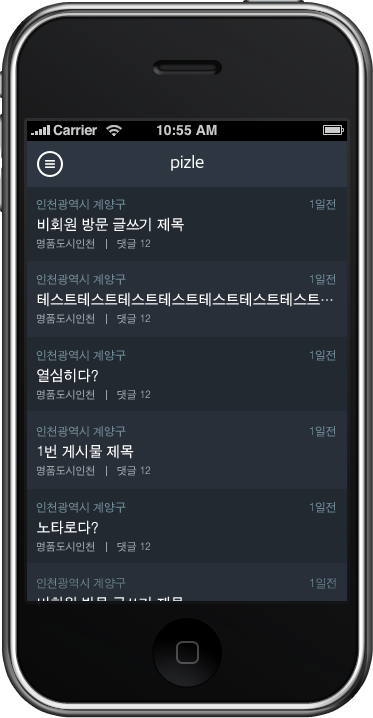
<style>
.page{position:relative;width:373px;height:718px;background:#232931}
.page>*{position:absolute;margin:0}
.t1{font:18px "AppleGothic";color:#ffffff}
.t2{font:12px "SandTg";color:#6d8a96}
.t3{font:15px "SandTg";color:#ffffff}
.t4{font:11px "SandTg";color:#9ca2a9}
</style>
<div class="page">
<p class="t1" style="left:171px;top:155px;width:33px;height:16px">pizle</p>
<p class="t2" style="left:36px;top:199px;width:90px;height:11px">인천광역시 계양구</p>
<p class="t2" style="left:310px;top:199px;width:26px;height:11px">1일전</p>
<p class="t3" style="left:38px;top:217px;width:146px;height:15px">비회원 방문 글쓰기 제목</p>
<p class="t4" style="left:37px;top:238px;width:114px;height:11px">명품도시인천       댓글 12</p>
<p class="t2" style="left:36px;top:274px;width:90px;height:11px">인천광역시 계양구</p>
<p class="t2" style="left:310px;top:274px;width:26px;height:11px">1일전</p>
<p class="t3" style="left:37px;top:292px;width:296px;height:15px">테스트테스트테스트테스트테스트테스트테스트…</p>
<p class="t4" style="left:37px;top:313px;width:114px;height:11px">명품도시인천       댓글 12</p>
<p class="t2" style="left:36px;top:350px;width:90px;height:11px">인천광역시 계양구</p>
<p class="t2" style="left:310px;top:350px;width:26px;height:11px">1일전</p>
<p class="t3" style="left:37px;top:368px;width:61px;height:15px">열심히다?</p>
<p class="t4" style="left:37px;top:389px;width:114px;height:11px">명품도시인천       댓글 12</p>
<p class="t2" style="left:36px;top:426px;width:90px;height:11px">인천광역시 계양구</p>
<p class="t2" style="left:310px;top:426px;width:26px;height:11px">1일전</p>
<p class="t3" style="left:38px;top:444px;width:96px;height:15px">1번 게시물 제목</p>
<p class="t4" style="left:37px;top:465px;width:114px;height:11px">명품도시인천       댓글 12</p>
<p class="t2" style="left:36px;top:502px;width:90px;height:11px">인천광역시 계양구</p>
<p class="t2" style="left:310px;top:502px;width:26px;height:11px">1일전</p>
<p class="t3" style="left:37px;top:520px;width:61px;height:15px">노타로다?</p>
<p class="t4" style="left:37px;top:541px;width:114px;height:11px">명품도시인천       댓글 12</p>
</div>
